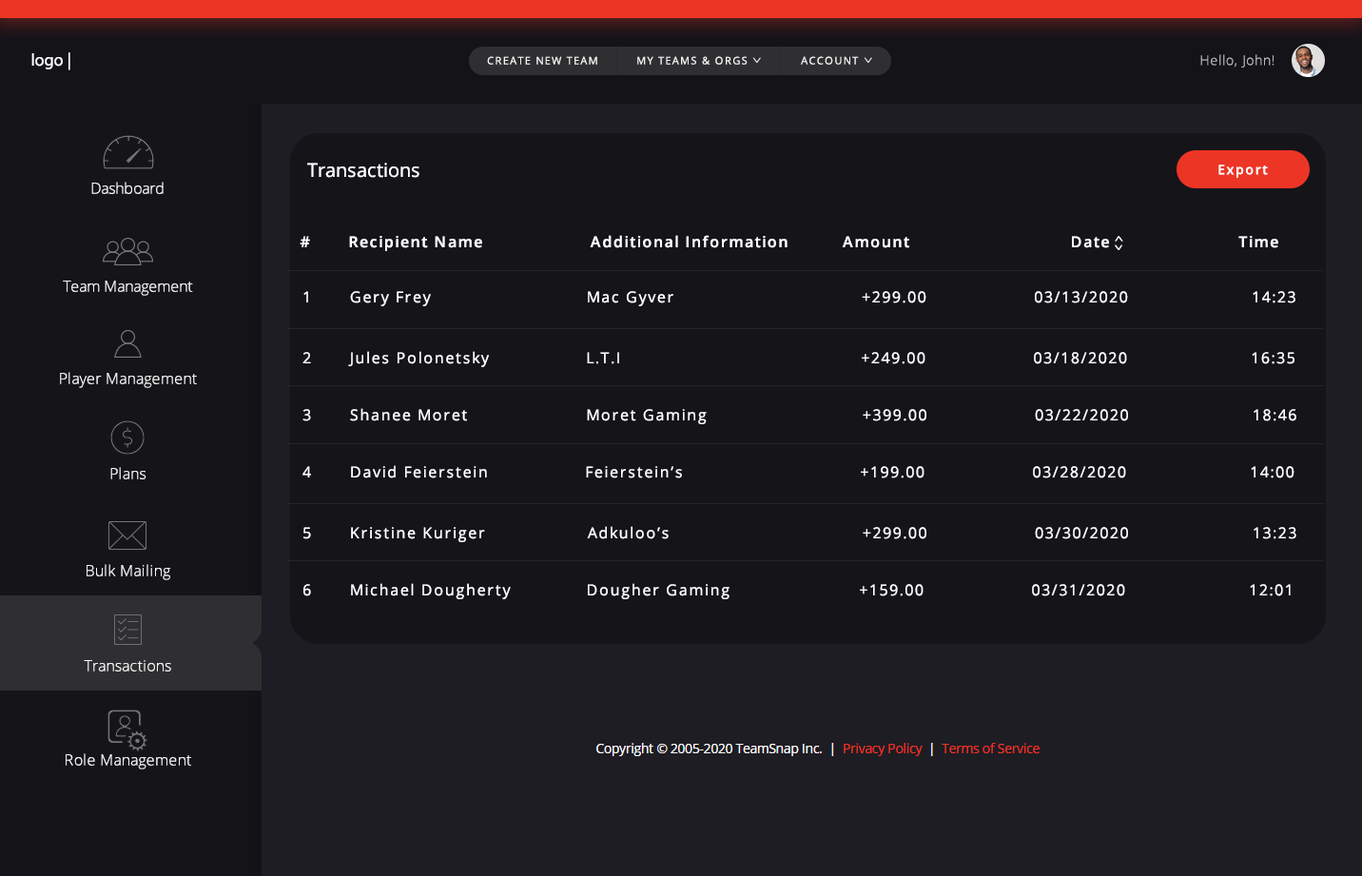
<style>
.page{position:relative;width:1362px;height:876px;background:#151419}
.page>*{position:absolute;margin:0}
.t1{font:17.1px "MyriadPro-Regular";color:#ffffff}
.t2{font:10.5px "OpenSans";letter-spacing:0.12em;color:#f2f2f2;text-transform:uppercase}
.t3{font:10.5px "OpenSans-Light";letter-spacing:0.02em;color:#f2f2f2;scale:1.45 1}
.t4{font:13.3px "OpenSans-Light";letter-spacing:0.06em;color:#bbbbbb}
.t5{font:19px "OpenSans";color:#ffffff}
.t6{font:13.3px "OpenSans-Semibold";letter-spacing:0.1em;color:#ffffff}
.t7{font:15.2px "OpenSans-Light";color:#f6f6f6}
.t8{font:15.2px "OpenSans-Semibold";letter-spacing:0.1em;color:#ffffff}
.t9{font:15.2px "OpenSans";letter-spacing:0.1em;color:#ffffff}
.t10{font:15.2px "OpenSans-Light";letter-spacing:0.02em;color:#f6f6f6}
</style>
<div class="page">
<p class="t1" style="left:31px;top:52px;width:39px;height:18px">logo |</p>
<p class="t2" style="left:487px;top:56px;width:110px;height:9px">Create New Team</p>
<p class="t2" style="left:637px;top:56px;width:110px;height:9px">My Teams &amp; ORGs</p>
<p class="t3" style="left:752px;top:57px;width:9px;height:6px;rotate:180deg">^</p>
<p class="t2" style="left:801px;top:56px;width:58px;height:9px">ACCount</p>
<p class="t3" style="left:863px;top:57px;width:9px;height:6px;rotate:180deg">^</p>
<p class="t4" style="left:1200px;top:54px;width:74px;height:14px">Hello, John!</p>
<p class="t5" style="left:307px;top:163px;width:112px;height:15px">Transactions</p>
<p class="t6" style="left:1218px;top:164px;width:49px;height:14px">Export</p>
<p class="t7" style="left:91px;top:182px;width:73px;height:12px">Dashboard</p>
<p class="t8" style="left:300px;top:235px;width:978px;height:16px">#       Recipient Name                    Additional Information          Amount                              Date                        Time</p>
<p class="t7" style="left:63px;top:281px;width:130px;height:15px">Team Management</p>
<p class="t9" style="left:303px;top:291px;width:992px;height:15px">1       Gery Frey                             Mac Gyver                                   +299.00                    03/13/2020                       14:23</p>
<p class="t9" style="left:302px;top:351px;width:992px;height:16px">2       Jules Polonetsky                  L.T.I                                             +249.00                    03/18/2020                       16:35</p>
<p class="t10" style="left:60px;top:372px;width:137px;height:16px">Player Management</p>
<p class="t9" style="left:302px;top:408px;width:994px;height:16px">3       Shanee Moret                      Moret Gaming                             +399.00                    03/22/2020                       18:46</p>
<p class="t10" style="left:110px;top:467px;width:36px;height:12px">Plans</p>
<p class="t9" style="left:302px;top:465px;width:992px;height:13px">4       David Feierstein                  Feierstein’s                                 +199.00                    03/28/2020                       14:00</p>
<p class="t9" style="left:303px;top:526px;width:993px;height:16px">5       Kristine Kuriger                   Adkuloo’s                                    +299.00                    03/30/2020                       13:23</p>
<p class="t10" style="left:87px;top:564px;width:84px;height:16px">Bulk Mailing</p>
<p class="t9" style="left:303px;top:583px;width:987px;height:16px">6       Michael Dougherty              Dougher Gaming                        +159.00                    03/31/2020                       12:01</p>
<p class="t10" style="left:84px;top:660px;width:87px;height:11px">Transactions</p>
<p class="t10" style="left:66px;top:753px;width:125px;height:16px">Role Management</p>
</div>
